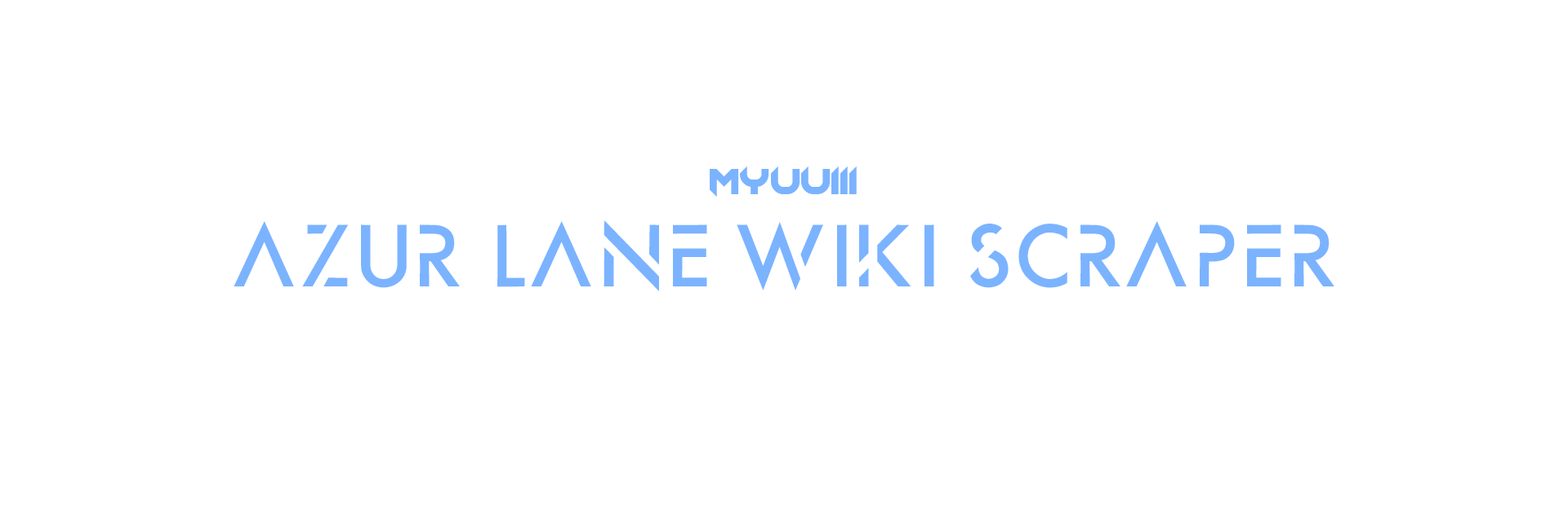
<style>
.page{position:relative;width:1568px;height:510px;background:#ffffff}
.page>*{position:absolute;margin:0}
.t1{font:36.7px "Chopsic";color:#7bb3ff}
.t2{font:81.7px "AlphaCentauri";color:#7bb3ff}
</style>
<div class="page">
<p class="t1" style="left:710px;top:166px;width:147px;height:32px">Myuuiii</p>
<p class="t2" style="left:234px;top:220px;width:1100px;height:72px">AZUR LANE WIKI SCRAPER</p>
</div>
